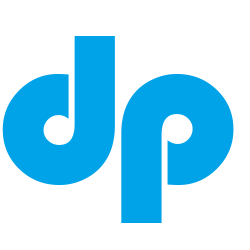
<style>
.page{position:relative;width:250px;height:250px;background:#ffffff}
.page>*{position:absolute;margin:0}
.t1{font:220px "Bauhaus93";letter-spacing:-0.055em;color:#00a2e8}
</style>
<div class="page">
<p class="t1" style="left:2px;top:36px;width:232px;height:187px">dp</p>
</div>
